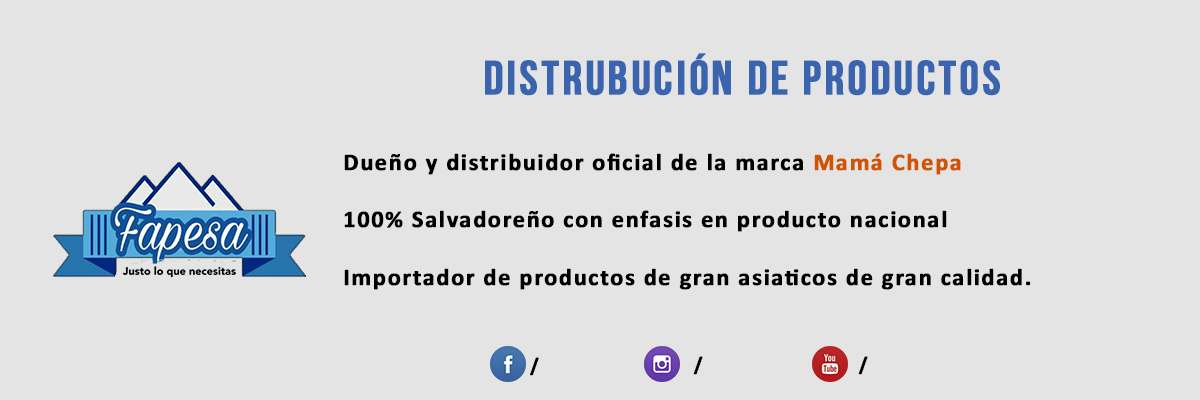
<style>
.page{position:relative;width:1200px;height:400px;background:#e4e4e4}
.page>*{position:absolute;margin:0}
.t1{font:48px "BebasNeueBold";letter-spacing:0.05em;color:#3a64ae;font-weight:bold}
.t2{font:24px "Calibri-Bold";letter-spacing:0.05em;color:#000000;font-weight:bold}
.t3{font:24px "Calibri-Bold";letter-spacing:0.05em;color:#d35400;font-weight:bold}
.t4{font:20px "Calibri-Bold";letter-spacing:0.05em;color:#000000;font-weight:bold}
</style>
<div class="page">
<p class="t1" style="left:485px;top:53px;width:515px;height:43px">Distrubución de productos</p>
<p class="t2" style="left:344px;top:153px;width:687px;height:137px">Dueño y distribuidor oficial de la marca <span class="t3">Mamá Chepa<br></span><br>100% Salvadoreño con enfasis en producto nacional<br><br>Importador de productos de gran asiaticos de gran calidad.</p>
<p class="t4" style="left:530px;top:357px;width:9px;height:19px">/</p>
<p class="t4" style="left:693px;top:356px;width:10px;height:19px">/</p>
<p class="t4" style="left:858px;top:356px;width:10px;height:19px">/</p>
</div>
